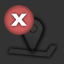
<style>
.page{position:relative;width:64px;height:64px;background:#333333}
.page>*{position:absolute;margin:0}
.t1{font:17.5px "MyriadPro-Bold";color:#ffffff;scale:1.49 1}
</style>
<div class="page">
<p class="t1" style="left:11px;top:13px;width:16px;height:13px">X</p>
</div>
